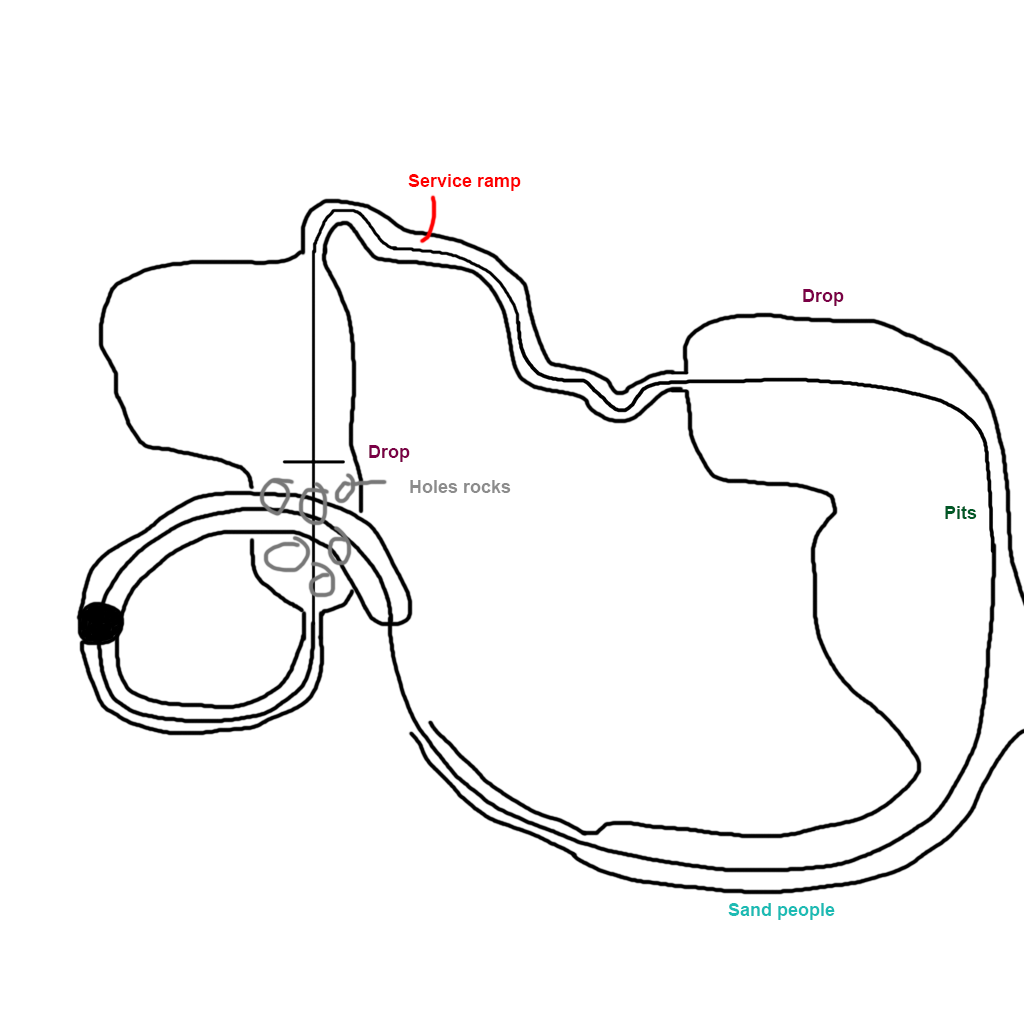
<style>
.page{position:relative;width:1024px;height:1024px;background:#ffffff}
.page>*{position:absolute;margin:0}
.t1{font:18px "Arial-BoldMT";color:#ff0000}
.t2{font:18px "Arial-BoldMT";color:#7b0046}
.t3{font:18px "Arial-BoldMT";color:#8c8c8c}
.t4{font:18px "Arial-BoldMT";color:#005826}
.t5{font:18px "Arial-BoldMT";color:#1cbbb4}
</style>
<div class="page">
<p class="t1" style="left:408px;top:174px;width:113px;height:17px">Service ramp</p>
<p class="t2" style="left:803px;top:289px;width:41px;height:17px">Drop</p>
<p class="t2" style="left:369px;top:445px;width:41px;height:17px">Drop</p>
<p class="t3" style="left:410px;top:480px;width:101px;height:13px">Holes rocks</p>
<p class="t4" style="left:945px;top:506px;width:32px;height:13px">Pits</p>
<p class="t5" style="left:728px;top:903px;width:107px;height:17px">Sand people</p>
</div>
